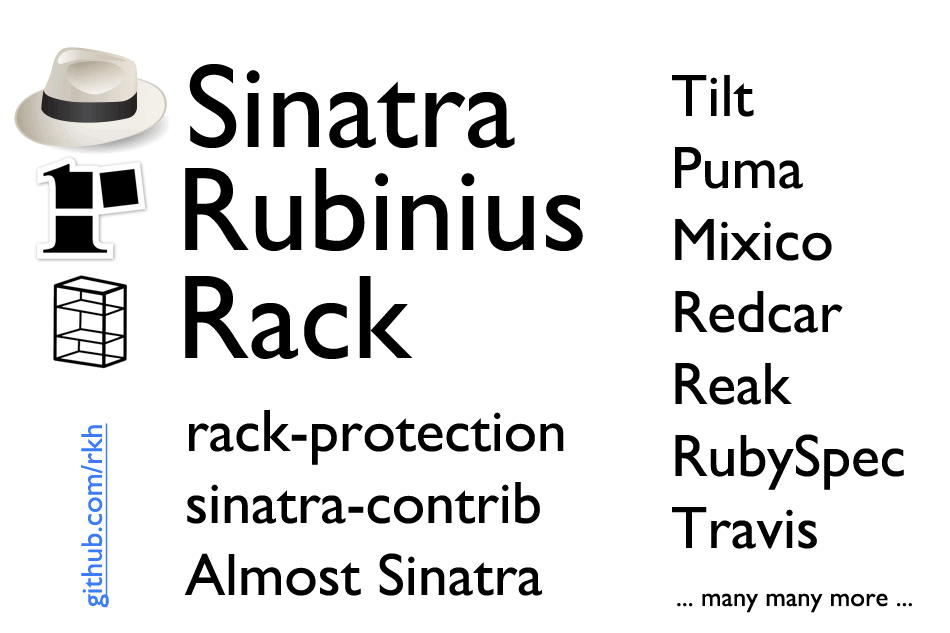
<style>
.page{position:relative;width:950px;height:633px;background:#ffffff}
.page>*{position:absolute;margin:0}
.t1{font:120px "GillSans";color:#000000}
.t2{font:60px "GillSans";color:#000000}
.t3{font:30px "GillSans";color:#3b7cff;text-decoration:underline}
.t4{font:26.7px "GillSans";color:#000000}
</style>
<div class="page">
<p class="t1" style="left:189px;top:64px;width:326px;height:84px">Sinatra</p>
<p class="t2" style="left:672px;top:75px;width:232px;height:474px">Tilt<br>Puma<br>Mixico<br>Redcar<br>Reak<br>RubySpec<br>Travis</p>
<p class="t1" style="left:185px;top:168px;width:398px;height:83px">Rubinius</p>
<p class="t1" style="left:185px;top:276px;width:228px;height:83px">Rack</p>
<p class="t2" style="left:185px;top:410px;width:379px;height:186px">rack-protection<br>sinatra-contrib<br>Almost Sinatra</p>
<p class="t3" style="left:81px;top:423px;width:28px;height:185px;rotate:-90deg">github.com/rkh</p>
<p class="t4" style="left:677px;top:593px;width:235px;height:20px">... many many more ...</p>
</div>
